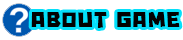
<style>
.page{position:relative;width:183px;height:40px;background:#ffffff}
.page>*{position:absolute;margin:0}
.t1{font:25.8px "-LayijiTaMaiTine1";color:#020202}
</style>
<div class="page">
<p class="t1" style="left:31px;top:12px;width:149px;height:16px">ABOUT GAME</p>
</div>
